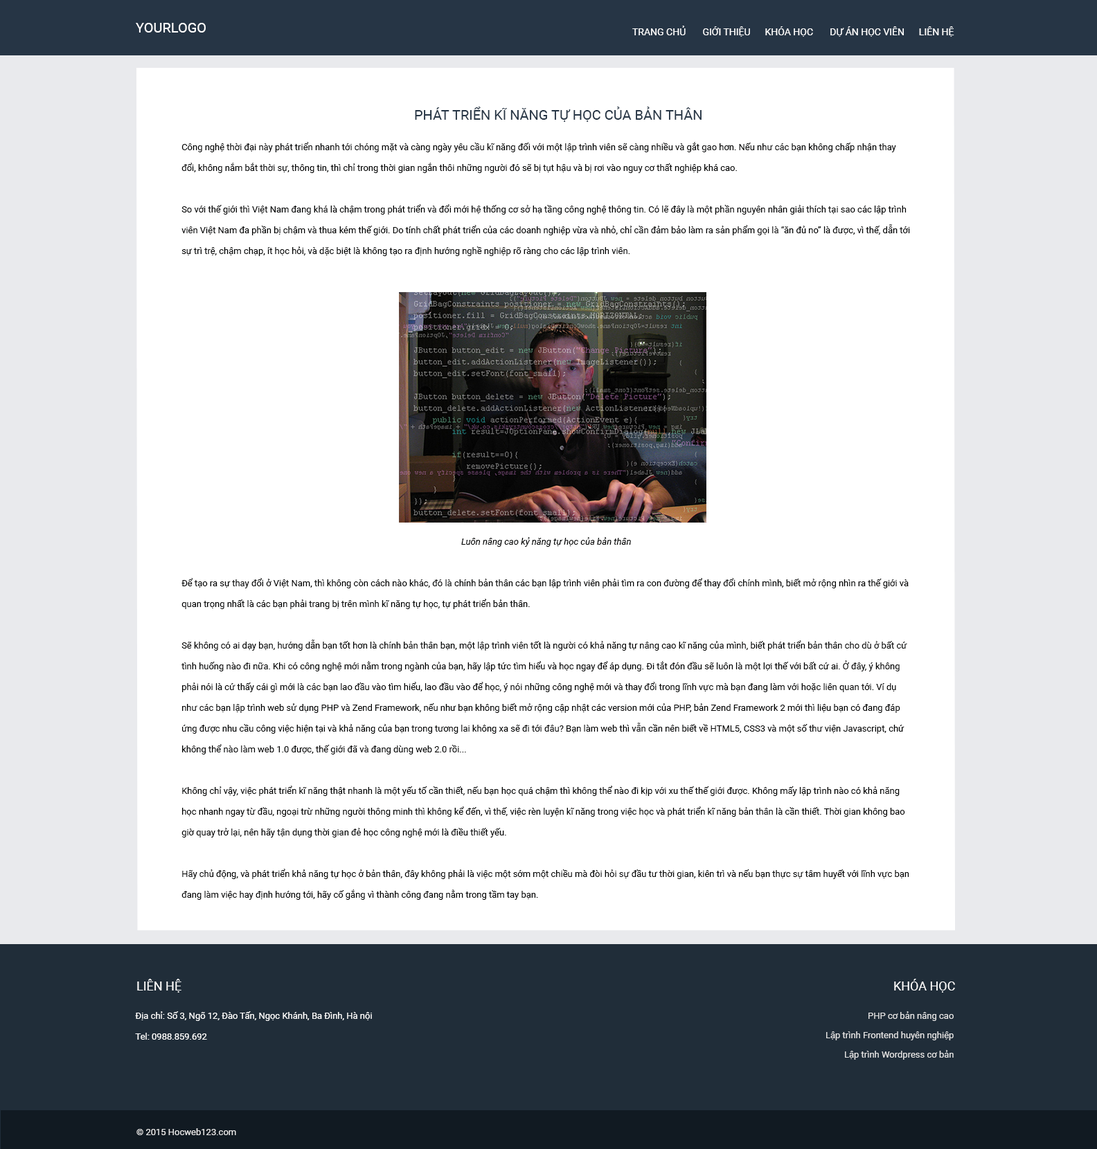
<style>
.page{position:relative;width:1097px;height:1149px;background:#ffffff}
.page>*{position:absolute;margin:0}
.t1{font:13.8px "Roboto-Regular";color:#ffffff}
.t2{font:9.7px "Roboto-Regular";color:#ffffff}
.t3{font:13.8px "Roboto-Regular";color:#263545}
.t4{font:9px/20.8px "Roboto-Regular";color:#000101}
.t5{font:9px/20.8px "Roboto-Italic";color:#000101}
.t6{font:12.5px "Roboto-Regular";color:#ffffff}
.t7{font:12.5px "Roboto-Regular";color:#fefefe}
.t8{font:9px/20.8px "Roboto-Regular";color:#ffffff}
.t9{font:9px "Roboto-Regular";color:#e3e3e3}
.t10{font:9px "Roboto-Regular";color:#e8e8e8}
</style>
<div class="page">
<p class="t1" style="left:136px;top:23px;width:70px;height:10px">YOURLOGO</p>
<p class="t2" style="left:632px;top:26px;width:322px;height:11px">TRANG CHỦ       GIỚI THIỆU      KHÓA HỌC       DỰ ÁN HỌC VIÊN      LIÊN HỆ</p>
<p class="t3" style="left:415px;top:107px;width:286px;height:15px">PHÁT TRIỂN KĨ NĂNG TỰ HỌC CỦA BẢN THÂN</p>
<p class="t4" style="left:181px;top:142px;width:729px;height:758px">Công nghệ thời đại này phát triển nhanh tới chóng mặt và càng ngày yêu cầu kĩ năng đối với một lập trình viên sẽ càng nhiều và gắt gao hơn. Nếu như các bạn không chấp nhận thay đổi, không nắm bắt thời sự, thông tin, thì chỉ trong thời gian ngắn thôi những người đó sẽ bị tụt hậu và bị rơi vào nguy cơ thất nghiệp khá cao.<br><br>So với thế giới thì Việt Nam đang khá là chậm trong phát triển và đổi mới hệ thống cơ sở hạ tầng công nghệ thông tin. Có lẽ đây là một phần nguyên nhân giải thích tại sao các lập trình viên Việt Nam đa phần bị chậm và thua kém thế giới. Do tính chất phát triển của các doanh nghiệp vừa và nhỏ, chỉ cần đảm bảo làm ra sản phẩm gọi là “ăn đủ no” là được, vì thế, dẫn tới sự trì trệ, chậm chạp, ít học hỏi, và dặc biệt là không tạo ra định hướng nghề nghiệp rõ ràng cho các lập trình viên.<br><br><br><br><br><br><br><br><br><br><br><br><br><br><span class="t5">Luôn nâng cao kỷ năng tự học của bản thân<br><br></span>Để tạo ra sự thay đổi ở Việt Nam, thì không còn cách nào khác, đó là chính bản thân các bạn lập trình viên phải tìm ra con đường để thay đổi chính mình, biết mở rộng nhìn ra thế giới và quan trọng nhất là các bạn phải trang bị trên mình kĩ năng tự học, tự phát triển bản thân.<br><br>Sẽ không có ai dạy bạn, hướng dẫn bạn tốt hơn là chính bản thân bạn, một lập trình viên tốt là người có khả năng tự nâng cao kĩ năng của mình, biết phát triển bản thân cho dù ở bất cứ tình huống nào đi nữa. Khi có công nghệ mới nằm trong ngành của bạn, hãy lập tức tìm hiểu và học ngay để áp dụng. Đi tắt đón đầu sẽ luôn là một lợi thế với bất cứ ai. Ở đây, ý không phải nói là cứ thấy cái gì mới là các bạn lao đầu vào tìm hiểu, lao đầu vào để học, ý nói những công nghệ mới và thay đổi trong lĩnh vực mà bạn đang làm với hoặc liên quan tới. Ví dụ như các bạn lập trình web sử dụng PHP và Zend Framework, nếu như bạn không biết mở rộng cập nhật các version mới của PHP, bản Zend Framework 2 mới thì liệu bạn có đang đáp ứng được nhu cầu công việc hiện tại và khả năng của bạn trong tương lai không xa sẽ đi tới đâu? Bạn làm web thì vẫn cần nên biết về HTML5, CSS3 và một số thư viện Javascript, chứ không thể nào làm web 1.0 được, thế giới đã và đang dùng web 2.0 rồi...<br><br>Không chỉ vậy, việc phát triển kĩ năng thật nhanh là một yếu tố cần thiết, nếu bạn học quá chậm thì không thể nào đi kịp với xu thế thế giới được. Không mấy lập trình nào có khả năng học nhanh ngay từ đầu, ngoại trừ những người thông minh thì không kể đến, vì thế, việc rèn luyện kĩ năng trong việc học và phát triển kĩ năng bản thân là cần thiết. Thời gian không bao giờ quay trở lại, nên hãy tận dụng thời gian đẻ học công nghệ mới là điều thiết yếu.<br><br>Hãy chủ động, và phát triển khả năng tự học ở bản thân, đây không phải là việc một sớm một chiều mà đòi hỏi sự đầu tư thời gian, kiên trì và nếu bạn thực sự tâm huyết với lĩnh vực bạn đang làm việc hay định hướng tới, hãy cố gắng vì thành công đang nằm trong tầm tay bạn.</p>
<p class="t6" style="left:137px;top:979px;width:44px;height:14px">LIÊN HỆ</p>
<p class="t7" style="left:894px;top:979px;width:61px;height:14px">KHÓA HỌC</p>
<p class="t8" style="left:135px;top:1011px;width:237px;height:29px">Địa chỉ: Số 3, Ngõ 12, Đào Tấn, Ngọc Khánh, Ba Đình, Hà nội<br>Tel: 0988.859.692</p>
<p class="t9" style="left:868px;top:1011px;width:85px;height:10px">PHP cơ bản nâng cao</p>
<p class="t9" style="left:826px;top:1032px;width:127px;height:9px">Lập trình Frontend huyên nghiệp</p>
<p class="t9" style="left:845px;top:1050px;width:108px;height:10px">Lập trình Wordpress cơ bản</p>
<p class="t10" style="left:136px;top:1128px;width:100px;height:7px">© 2015 Hocweb123.com</p>
</div>
